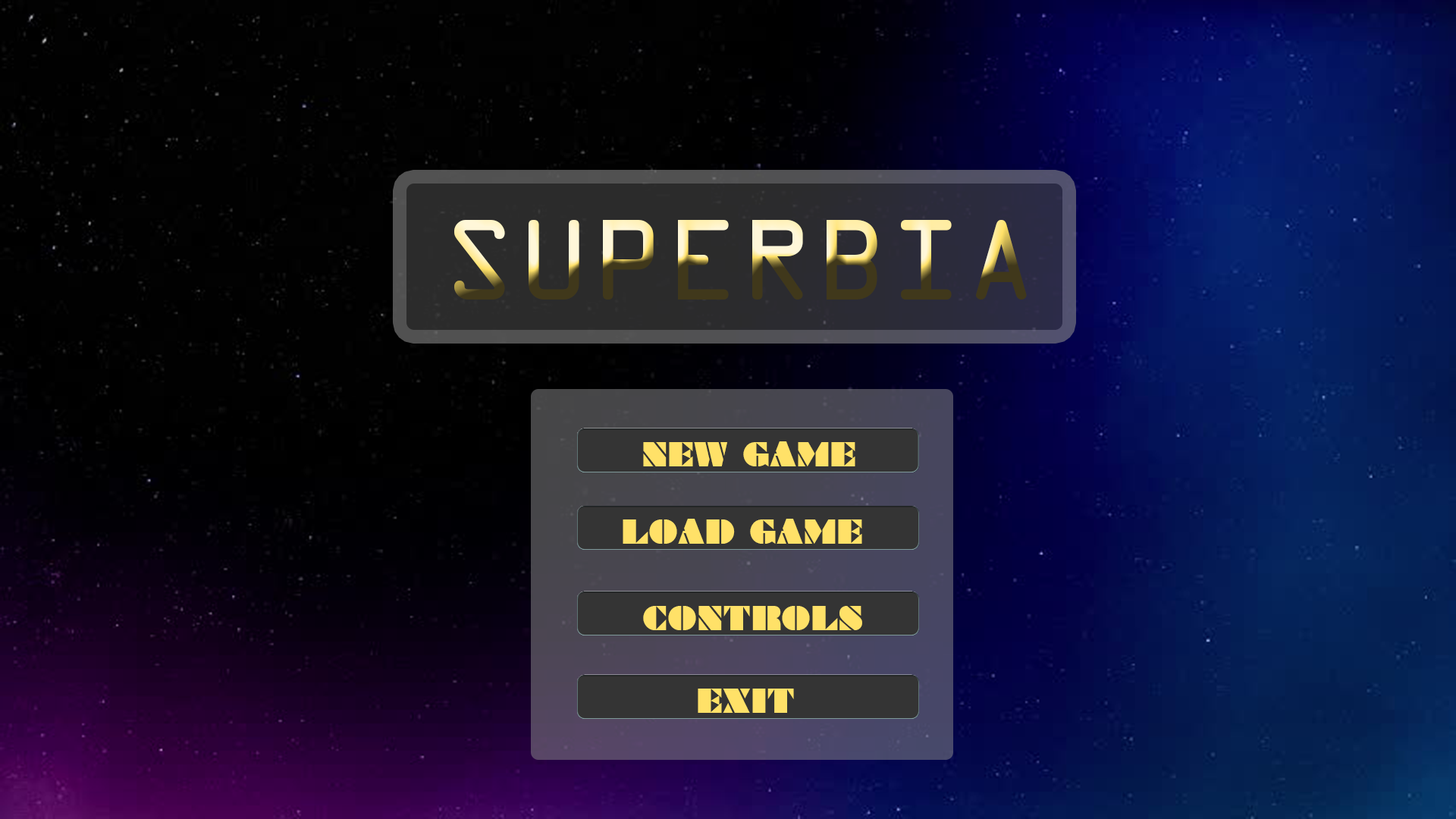
<style>
.page{position:relative;width:1456px;height:819px}
.page>*{position:absolute;margin:0}
.t1{font:175.1px "OCRAStd";letter-spacing:0.01em}
.t2{font:55px "Braggadocio";letter-spacing:0.01em;color:#ffe168;scale:0.9 1}
.t3{font:54.8px "Braggadocio";letter-spacing:0.01em;color:#ffe168;scale:0.9 1}
.t4{font:54.9px "Braggadocio";letter-spacing:0.01em;color:#ffe168;scale:0.9 1}
</style>
<div class="page">
<p class="t1" style="left:454px;top:220px;width:573px;height:80px">SUPERBIA</p>
<p class="t2" style="left:643px;top:441px;width:212px;height:25px">NEW GAME</p>
<p class="t3" style="left:623px;top:519px;width:239px;height:25px">LOAD GAME</p>
<p class="t4" style="left:643px;top:606px;width:219px;height:24px">CONTROLS</p>
<p class="t4" style="left:698px;top:689px;width:96px;height:24px">EXIT</p>
</div>
